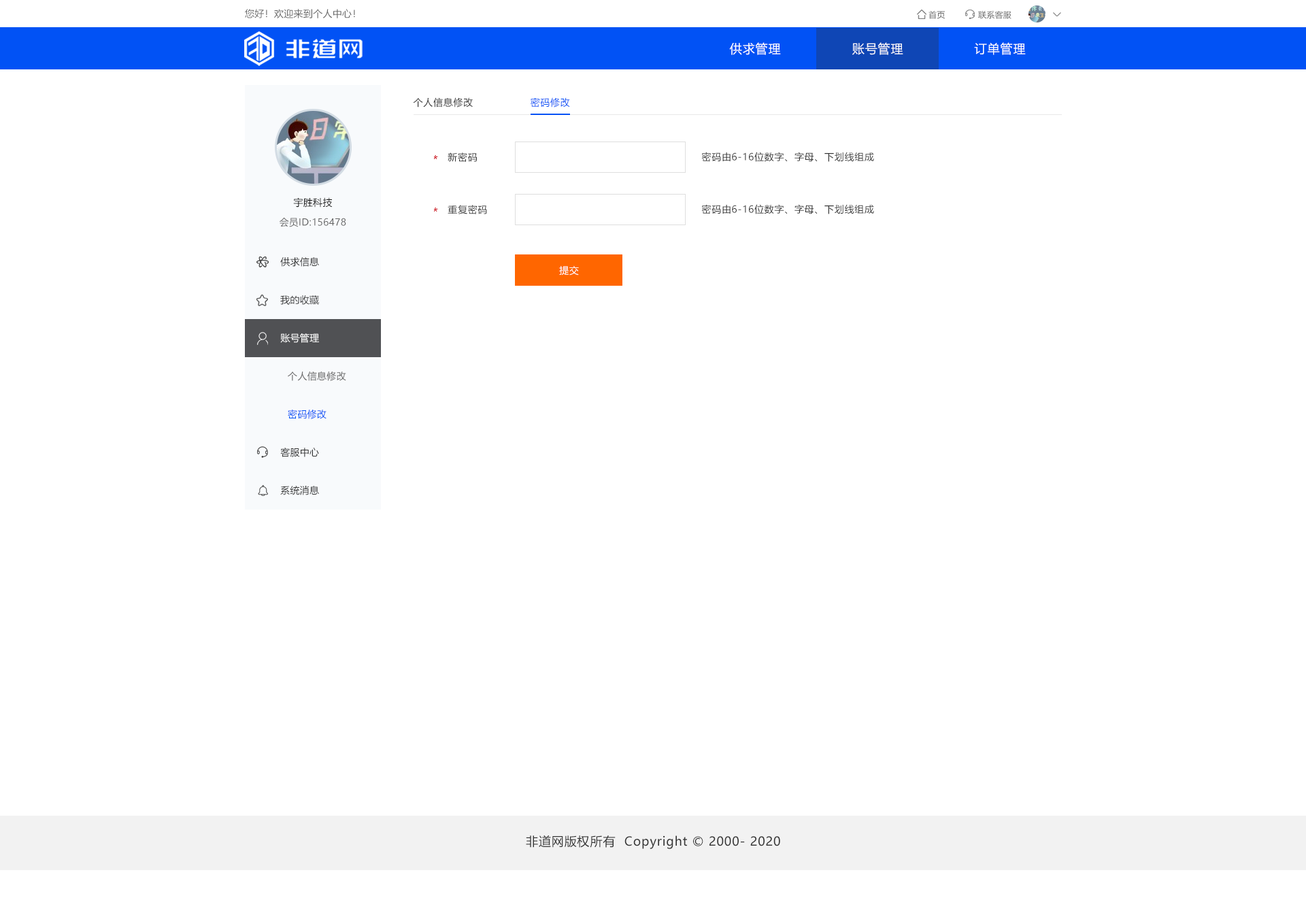
<style>
.page{position:relative;width:1306px;height:913px;background:#ffffff}
.page>*{position:absolute;margin:0}
.t1{font:9.5px "MicrosoftYaHei";letter-spacing:0.022em;color:#666666}
.t2{font:8.2px "MicrosoftYaHei";letter-spacing:0.022em;color:#666666}
.t3{font:12.2px "MicrosoftYaHei";letter-spacing:0.05em;color:#ffffff}
.t4{font:9.5px "MicrosoftYaHei";letter-spacing:0.05em;color:#333333}
.t5{font:9.5px "MicrosoftYaHei";letter-spacing:0.05em;color:#0152f5}
.t6{font:9.5px "MicrosoftYaHei";letter-spacing:0.022em;color:#141414}
.t7{font:9.5px "MicrosoftYaHei";letter-spacing:0.022em;color:#333333}
.t8{font:9.5px "MicrosoftYaHei";letter-spacing:0.05em;color:#ffffff}
.t9{font:9.5px "MicrosoftYaHei";letter-spacing:0.022em;color:#ffffff}
.t10{font:9.5px "MicrosoftYaHei";letter-spacing:0.022em;color:#0152f5}
.t11{font:12.2px "MicrosoftYaHei";letter-spacing:0.05em;color:#333333}
</style>
<div class="page">
<p class="t1" style="left:245px;top:9px;width:110px;height:9px">您好！欢迎来到个人中心！</p>
<p class="t2" style="left:929px;top:11px;width:16px;height:8px">首页</p>
<p class="t2" style="left:978px;top:11px;width:34px;height:8px">联系客服</p>
<p class="t3" style="left:729px;top:42px;width:52px;height:13px">供求管理</p>
<p class="t3" style="left:852px;top:42px;width:51px;height:13px">账号管理</p>
<p class="t3" style="left:974px;top:42px;width:52px;height:13px">订单管理</p>
<p class="t4" style="left:413px;top:97px;width:60px;height:10px">个人信息修改</p>
<p class="t5" style="left:531px;top:97px;width:39px;height:10px">密码修改</p>
<p class="t4" style="left:448px;top:152px;width:29px;height:10px">新密码</p>
<p class="t4" style="left:701px;top:152px;width:173px;height:10px">密码由6-16位数字、字母、下划线组成</p>
<p class="t6" style="left:293px;top:197px;width:40px;height:10px">宇胜科技</p>
<p class="t4" style="left:448px;top:205px;width:39px;height:9px">重复密码</p>
<p class="t4" style="left:701px;top:204px;width:173px;height:10px">密码由6-16位数字、字母、下划线组成</p>
<p class="t1" style="left:280px;top:218px;width:66px;height:9px">会员ID:156478</p>
<p class="t7" style="left:280px;top:257px;width:39px;height:10px">供求信息</p>
<p class="t8" style="left:559px;top:266px;width:20px;height:10px">提交</p>
<p class="t7" style="left:280px;top:295px;width:39px;height:10px">我的收藏</p>
<p class="t9" style="left:280px;top:333px;width:39px;height:10px">账号管理</p>
<p class="t1" style="left:288px;top:371px;width:58px;height:10px">个人信息修改</p>
<p class="t10" style="left:288px;top:410px;width:39px;height:9px">密码修改</p>
<p class="t7" style="left:280px;top:448px;width:39px;height:9px">客服中心</p>
<p class="t7" style="left:280px;top:486px;width:39px;height:9px">系统消息</p>
<p class="t11" style="left:526px;top:835px;width:254px;height:14px">非道网版权所有  Copyright © 2000- 2020</p>
</div>
